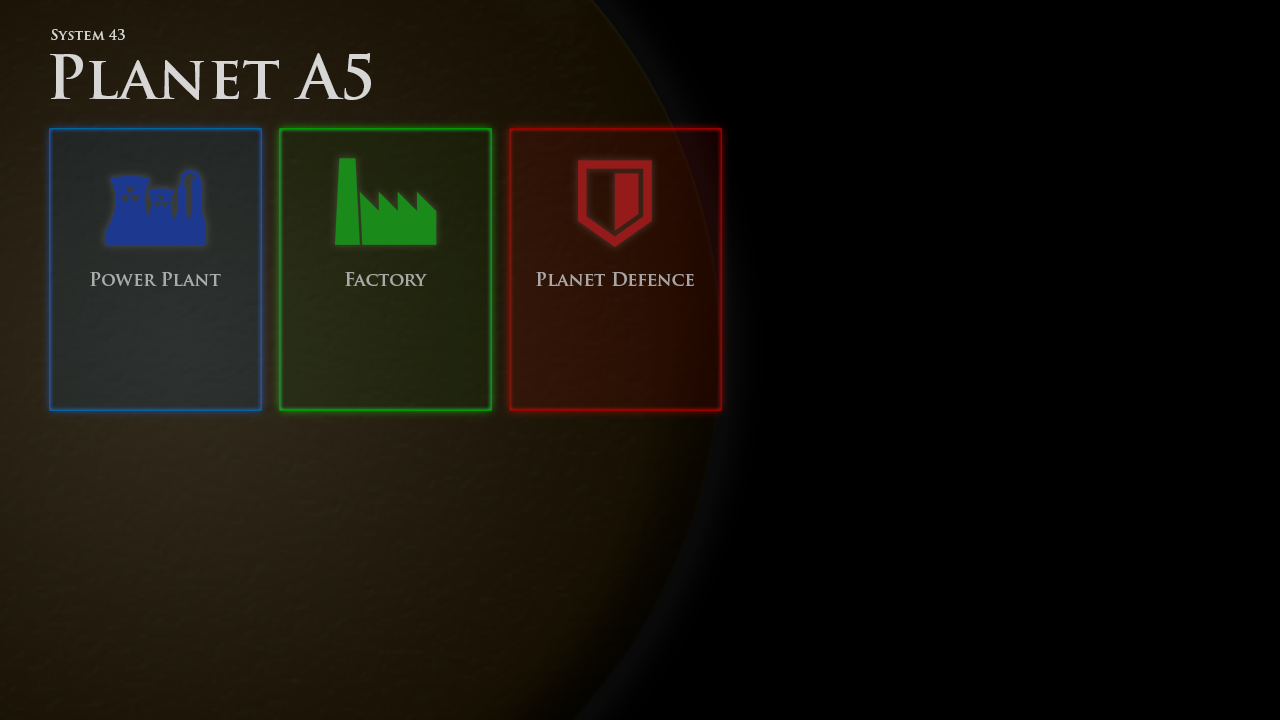
<style>
.page{position:relative;width:1280px;height:720px;background:#000000}
.page>*{position:absolute;margin:0}
.t1{font:14px "TrajanPro-Bold";color:#d6d6d5}
.t2{font:60px "TrajanPro-Bold";color:#d7d6d5}
.t3{font:18px "TrajanPro-Bold";color:#abacac}
.t4{font:18px "TrajanPro-Bold";color:#aaaba6}
.t5{font:18px "TrajanPro-Bold";color:#aba6a4}
</style>
<div class="page">
<p class="t1" style="left:51px;top:29px;width:74px;height:11px">System 43</p>
<p class="t2" style="left:50px;top:53px;width:321px;height:47px">Planet A5</p>
<p class="t3" style="left:90px;top:272px;width:131px;height:14px">Power Plant</p>
<p class="t4" style="left:345px;top:272px;width:82px;height:14px">Factory</p>
<p class="t5" style="left:536px;top:272px;width:158px;height:14px">Planet Defence</p>
</div>
